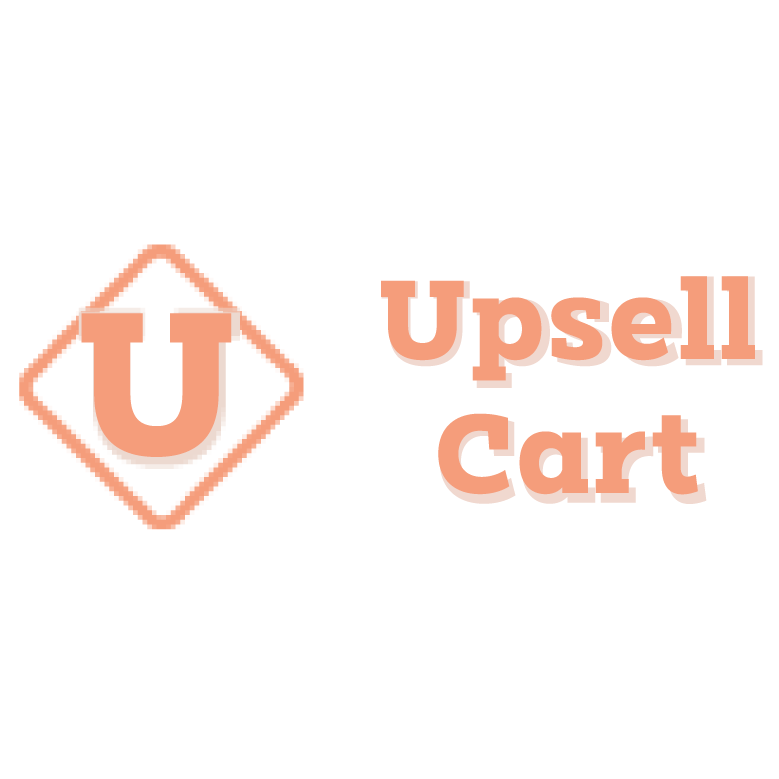
<style>
.page{position:relative;width:779px;height:779px;background:#ffffff}
.page>*{position:absolute;margin:0}
.t1{font:116.7px/133.3px "ClabPersonalUse-Bold";letter-spacing:0.04em;color:#f59d7b}
.t2{font:211.4px "ClabPersonalUse-Bold";letter-spacing:0.04em;color:#f59d7b}
</style>
<div class="page">
<p class="t1" style="left:381px;top:276px;width:374px;height:219px;text-align:center">Upsell<br>Cart</p>
<p class="t2" style="left:81px;top:313px;width:151px;height:144px">U</p>
</div>
